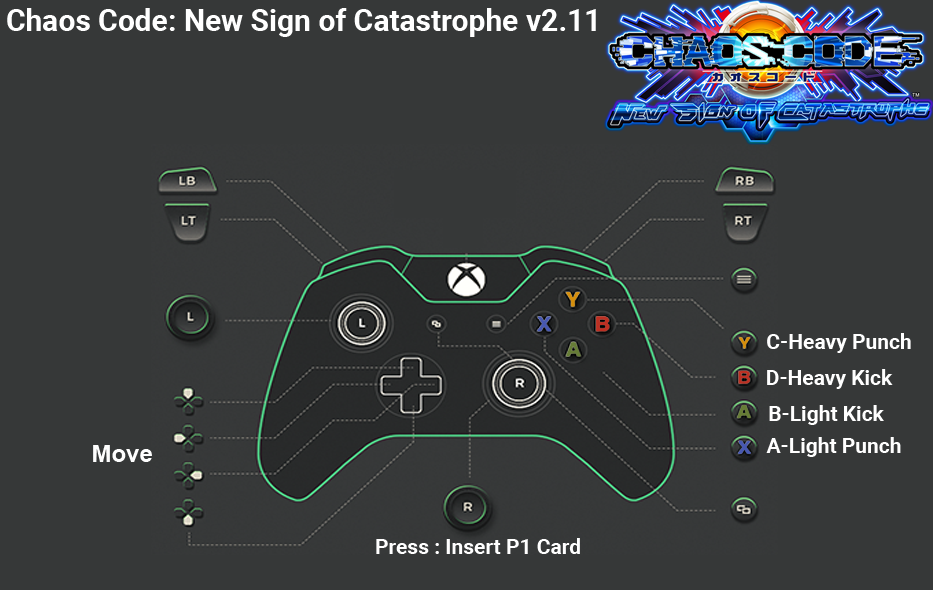
<style>
.page{position:relative;width:933px;height:590px;background:#363838}
.page>*{position:absolute;margin:0}
.t1{font:30px "Roboto-Bold";color:#ffffff}
.t2{font:21px "Roboto-Bold";color:#ffffff}
.t3{font:24px "Arial-BoldMT";color:#fefefe}
</style>
<div class="page">
<p class="t1" style="left:7px;top:8px;width:589px;height:29px">Chaos Code: New Sign of Catastrophe v2.11</p>
<p class="t2" style="left:767px;top:333px;width:144px;height:20px">C-Heavy Punch</p>
<p class="t2" style="left:767px;top:369px;width:126px;height:20px">D-Heavy Kick</p>
<p class="t2" style="left:769px;top:405px;width:115px;height:20px">B-Light Kick</p>
<p class="t2" style="left:766px;top:437px;width:135px;height:20px">A-Light Punch</p>
<p class="t3" style="left:93px;top:445px;width:59px;height:17px">Move</p>
<p class="t2" style="left:376px;top:538px;width:204px;height:16px">Press : Insert P1 Card</p>
</div>
